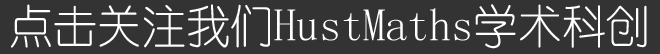
<style>
.page{position:relative;width:660px;height:54px;background:#333333}
.page>*{position:absolute;margin:0}
.t1{font:46px "YouYuan";color:#ffffff;scale:0.96 1}
</style>
<div class="page">
<p class="t1" style="left:11px;top:4px;width:636px;height:45px">点击关注我们HustMaths学术科创</p>
</div>
